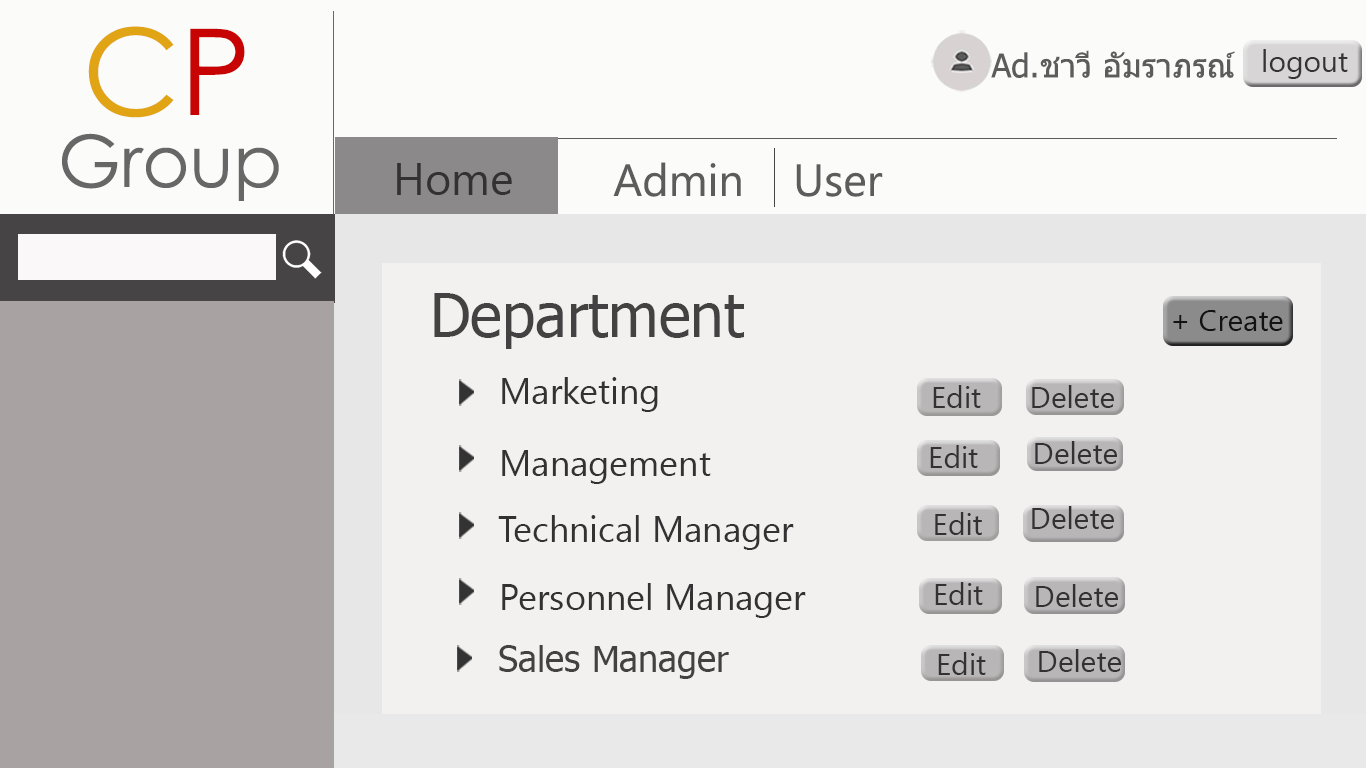
<style>
.page{position:relative;width:1366px;height:768px;background:#f3f0f0}
.page>*{position:absolute;margin:0}
.t1{font:120px "CenturyGothic";color:#e0a415}
.t2{font:120px "CenturyGothic";color:#c80303}
.t3{font:33px "Tahoma";color:#5d5c5c}
.t4{font:30px "SegoeUI";color:#353434}
.t5{font:72px "CenturyGothic";color:#676767}
.t6{font:45px "SegoeUI";color:#333131}
.t7{font:45px "SegoeUI";color:#5d5c5c}
.t8{font:60px "Tahoma";color:#434141}
.t9{font:30px "SegoeUI";color:#131212}
.t10{font:36px "SegoeUI";color:#333131}
.t11{font:30px "SegoeUI";color:#333131}
.t12{font:36px "Tahoma";color:#434141}
</style>
<div class="page">
<p class="t1" style="left:88px;top:26px;width:157px;height:92px">C<span class="t2">P</span></p>
<p class="t3" style="left:991px;top:50px;width:244px;height:28px">Ad.ชาวี อัมราภรณ์</p>
<p class="t4" style="left:1263px;top:49px;width:85px;height:30px">logout</p>
<p class="t5" style="left:62px;top:133px;width:217px;height:68px">Group</p>
<p class="t6" style="left:397px;top:163px;width:115px;height:32px">Home</p>
<p class="t7" style="left:398px;top:162px;width:485px;height:35px">Home        Admin    User</p>
<p class="t8" style="left:434px;top:293px;width:310px;height:56px">Department</p>
<p class="t9" style="left:1173px;top:310px;width:110px;height:21px">+ Create</p>
<p class="t10" style="left:502px;top:377px;width:156px;height:35px">Marketing</p>
<p class="t11" style="left:933px;top:385px;width:48px;height:23px">Edit</p>
<p class="t11" style="left:1032px;top:385px;width:82px;height:23px">Delete</p>
<p class="t11" style="left:930px;top:445px;width:48px;height:23px">Edit</p>
<p class="t11" style="left:1035px;top:441px;width:82px;height:23px">Delete</p>
<p class="t10" style="left:502px;top:450px;width:209px;height:34px">Management</p>
<p class="t11" style="left:1032px;top:506px;width:82px;height:23px">Delete</p>
<p class="t10" style="left:498px;top:515px;width:296px;height:35px">Technical Manager</p>
<p class="t11" style="left:935px;top:512px;width:47px;height:23px">Edit</p>
<p class="t11" style="left:935px;top:582px;width:48px;height:23px">Edit</p>
<p class="t10" style="left:502px;top:583px;width:304px;height:35px">Personnel Manager</p>
<p class="t11" style="left:1036px;top:584px;width:82px;height:23px">Delete</p>
<p class="t12" style="left:499px;top:645px;width:230px;height:34px">Sales Manager</p>
<p class="t11" style="left:938px;top:652px;width:48px;height:23px">Edit</p>
<p class="t11" style="left:1039px;top:649px;width:82px;height:23px">Delete</p>
</div>
